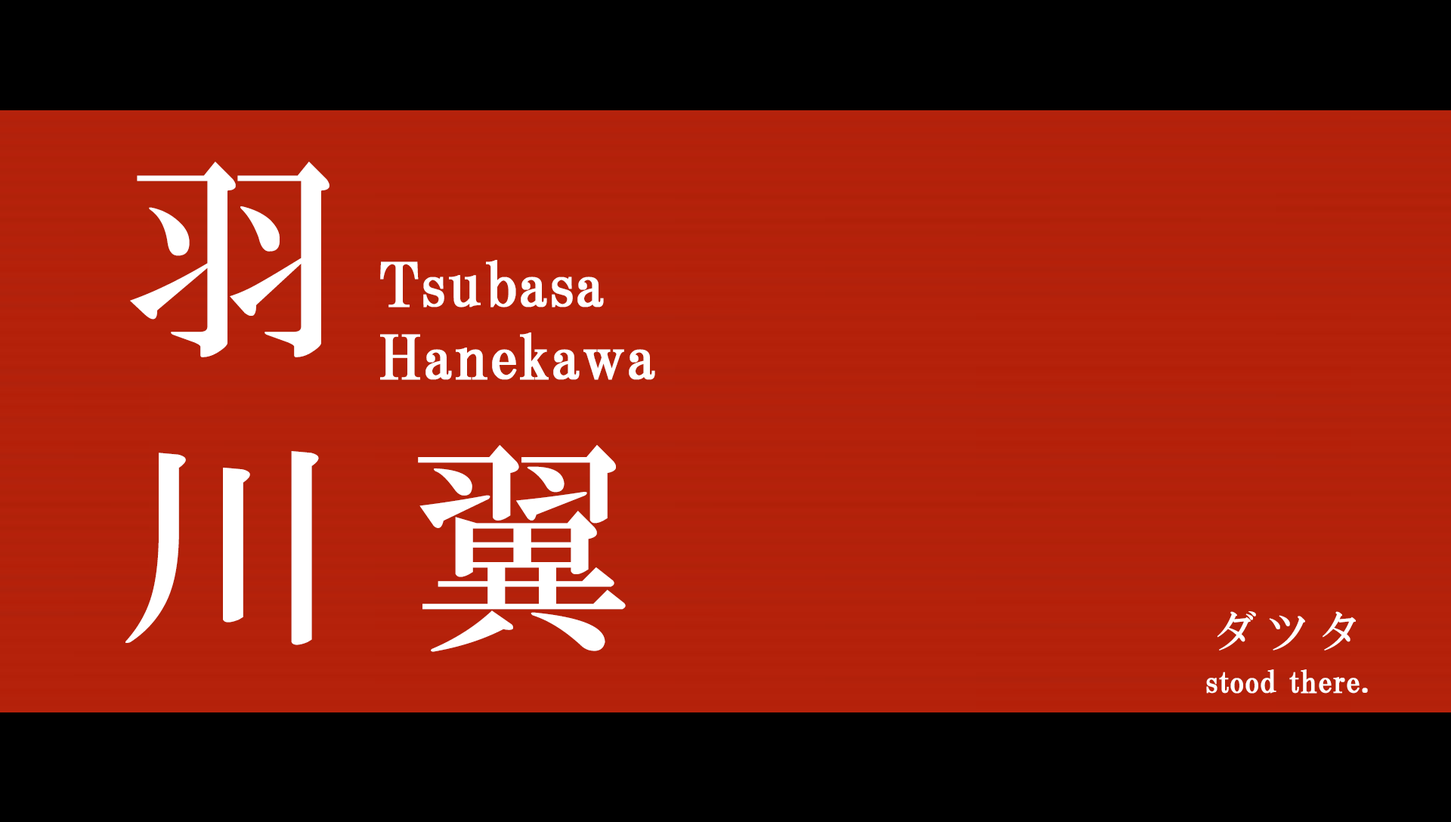
<style>
.page{position:relative;width:1451px;height:822px;background:#000000}
.page>*{position:absolute;margin:0}
.t1{font:222.1px/289.4px "HGMinchoB";letter-spacing:0.3em;color:#ffffff}
.t2{font:60.4px "HGPMinchoB";letter-spacing:0.01em;color:#ffffff;font-weight:bold}
.t3{font:60.4px "HGPMinchoB";color:#ffffff;font-weight:bold}
.t4{font:43.8px "HGMinchoB";letter-spacing:0.2em;color:#ffffff}
.t5{font:30.2px "HGPMinchoB";letter-spacing:0.01em;color:#ffffff;font-weight:bold}
</style>
<div class="page">
<p class="t1" style="left:125px;top:162px;width:501px;height:490px">羽<br>川翼</p>
<p class="t2" style="left:380px;top:260px;width:275px;height:120px">Tsubasa<br>H<span class="t3">anekawa</span></p>
<p class="t4" style="left:1216px;top:611px;width:139px;height:40px">ダツタ</p>
<p class="t5" style="left:1206px;top:669px;width:162px;height:25px">stood there.</p>
</div>
